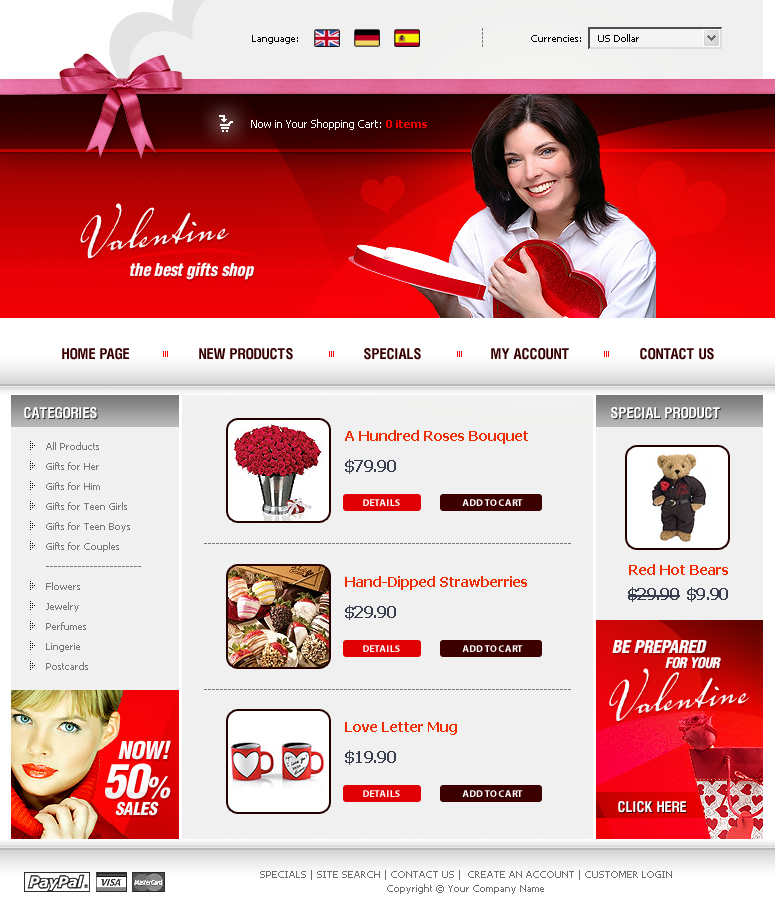
<style>
.page{position:relative;width:775px;height:915px;background:#f0f0f0}
.page>*{position:absolute;margin:0}
.t1{font:10px "Tahoma";color:#797978}
.t2{font:10px "Tahoma";color:#000000}
.t3{font:11px "Tahoma";color:#ffffff}
.t4{font:11px "Tahoma-Bold";color:#ec0004}
.t5{font:75px "VolutaScriptPro-Regular";color:#fbfafa}
.t6{font:18px "HeliosCondBlack-Italic";letter-spacing:-0.04em;color:#fdfdfd}
.t7{font:15px "HeliosCond-Bold";color:#370000}
.t8{font:15px "HeliosCond-Bold";color:#ffffff}
.t9{font:14px "Tahoma-Bold";color:#f02e03}
.t10{font:10px/20px "Tahoma";color:#777777}
.t11{font:16px "Tahoma-Bold";letter-spacing:-0.04em;color:#393f4e}
.t12{font:10px "MyriadPro-Bold";color:#ffffff}
.t13{font:10px "Tahoma";color:#777777}
.t14{font:15px "HeliosCondBlack-Italic";letter-spacing:-0.04em;color:#fdfdfd}
.t15{font:72px "VolutaScriptPro-Regular";color:#fbfafa}
.t16{font:25px "HeliosCondBlack-Italic";letter-spacing:-0.04em;color:#fdfdfd}
.t17{font:48px "HeliosCondBlack-Italic";letter-spacing:-0.04em;color:#fcfcfc}
.t18{font:30px "HeliosCondBlack-Italic";letter-spacing:-0.04em;color:#fcfcfc}
.t19{font:10px/14px "Tahoma";color:#6d6d6d;text-transform:uppercase}
.t20{font:10px/14px "Tahoma";color:#6d6d6d}
</style>
<div class="page">
<p class="t1" style="left:482px;top:28px;width:1px;height:19px;rotate:90deg">-----</p>
<p class="t2" style="left:252px;top:35px;width:46px;height:9px">Language:</p>
<p class="t2" style="left:531px;top:35px;width:50px;height:7px">Currencies:</p>
<p class="t2" style="left:598px;top:34px;width:41px;height:8px">US Dollar</p>
<p class="t3" style="left:251px;top:119px;width:176px;height:11px">Now in Your Shopping Cart:<span class="t4"> 0 items</span></p>
<p class="t5" style="left:80px;top:203px;width:149px;height:56px;rotate:-6deg">Valentine</p>
<p class="t6" style="left:130px;top:262px;width:124px;height:18px">the best gifts shop</p>
<p class="t7" style="left:62px;top:348px;width:67px;height:12px">HOME PAGE</p>
<p class="t7" style="left:199px;top:348px;width:94px;height:12px">NEW PRODUCTS</p>
<p class="t7" style="left:364px;top:348px;width:57px;height:12px">SPECIALS</p>
<p class="t7" style="left:491px;top:348px;width:78px;height:12px">MY ACCOUNT</p>
<p class="t7" style="left:640px;top:348px;width:74px;height:12px">CONTACT US</p>
<p class="t8" style="left:24px;top:407px;width:73px;height:12px">CATEGORIES</p>
<p class="t8" style="left:611px;top:407px;width:109px;height:12px">SPECIAL PRODUCT</p>
<p class="t9" style="left:345px;top:430px;width:183px;height:14px">A Hundred Roses Bouquet</p>
<p class="t10" style="left:46px;top:442px;width:95px;height:228px">All Products<br>Gifts for Her<br>Gifts for Him<br>Gifts for Teen Girls<br>Gifts for Teen Boys<br>Gifts for Couples<br>------------------------<br>Flowers<br>Jewelry<br>Perfumes<br>Lingerie<br>Postcards</p>
<p class="t11" style="left:345px;top:459px;width:51px;height:15px">$79.90</p>
<p class="t12" style="left:363px;top:499px;width:37px;height:7px">DETAILS</p>
<p class="t12" style="left:462px;top:499px;width:61px;height:7px">ADD TO CART</p>
<p class="t13" style="left:204px;top:543px;width:367px;height:1px">--------------------------------------------------------------------------------------------</p>
<p class="t9" style="left:629px;top:564px;width:99px;height:11px">Red Hot Bears</p>
<p class="t9" style="left:345px;top:576px;width:182px;height:14px">Hand-Dipped Strawberries</p>
<p class="t11" style="left:628px;top:587px;width:52px;height:15px">$29.90</p>
<p class="t11" style="left:687px;top:587px;width:41px;height:15px">$9.90</p>
<p class="t11" style="left:345px;top:605px;width:51px;height:15px">$29.90</p>
<p class="t6" style="left:612px;top:640px;width:95px;height:14px">BE PREPARED</p>
<p class="t12" style="left:363px;top:645px;width:37px;height:7px">DETAILS</p>
<p class="t12" style="left:462px;top:645px;width:61px;height:7px">ADD TO CART</p>
<p class="t14" style="left:665px;top:657px;width:56px;height:12px">FOR YOUR</p>
<p class="t15" style="left:609px;top:668px;width:141px;height:53px;rotate:-6deg">Valentine</p>
<p class="t13" style="left:204px;top:689px;width:367px;height:1px">--------------------------------------------------------------------------------------------</p>
<p class="t9" style="left:345px;top:722px;width:112px;height:13px">Love Letter Mug</p>
<p class="t16" style="left:118px;top:740px;width:53px;height:20px">NOW!</p>
<p class="t11" style="left:345px;top:750px;width:51px;height:15px">$19.90</p>
<p class="t17" style="left:105px;top:763px;width:66px;height:36px">50<span class="t18">%</span></p>
<p class="t12" style="left:363px;top:790px;width:37px;height:7px">DETAILS</p>
<p class="t12" style="left:462px;top:790px;width:61px;height:7px">ADD TO CART</p>
<p class="t6" style="left:115px;top:801px;width:44px;height:15px">SALES</p>
<p class="t8" style="left:618px;top:801px;width:68px;height:12px">CLICK HERE</p>
<p class="t19" style="left:260px;top:870px;width:412px;height:24px;text-align:center">Specials | Site Search | Contact Us |  Create an Account | Customer Login<br><span class="t20">Copyright © Your Company Name</span></p>
</div>
